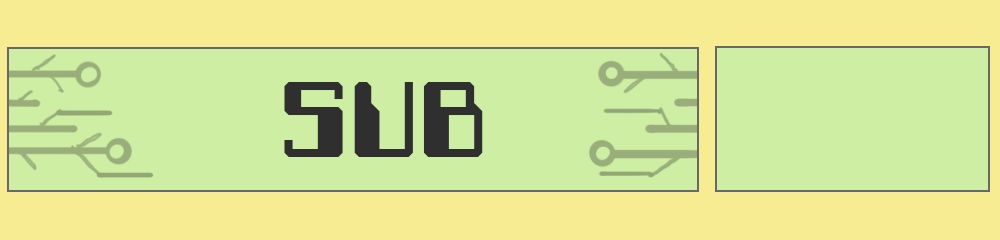
<style>
.page{position:relative;width:1000px;height:240px;background:#ceefa3}
.page>*{position:absolute;margin:0}
.t1{font:125px "Computerfont";color:#302f30}
</style>
<div class="page">
<p class="t1" style="left:284px;top:82px;width:199px;height:75px">SUB</p>
</div>
